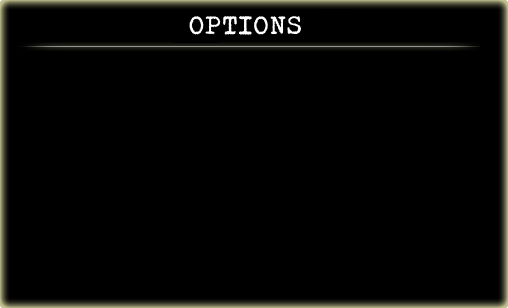
<style>
.page{position:relative;width:508px;height:308px;background:#000000}
.page>*{position:absolute;margin:0}
.t1{font:25.9px "Bohemian-typewriter";color:#ffffff}
</style>
<div class="page">
<p class="t1" style="left:189px;top:16px;width:112px;height:19px">OPTIONS</p>
</div>
